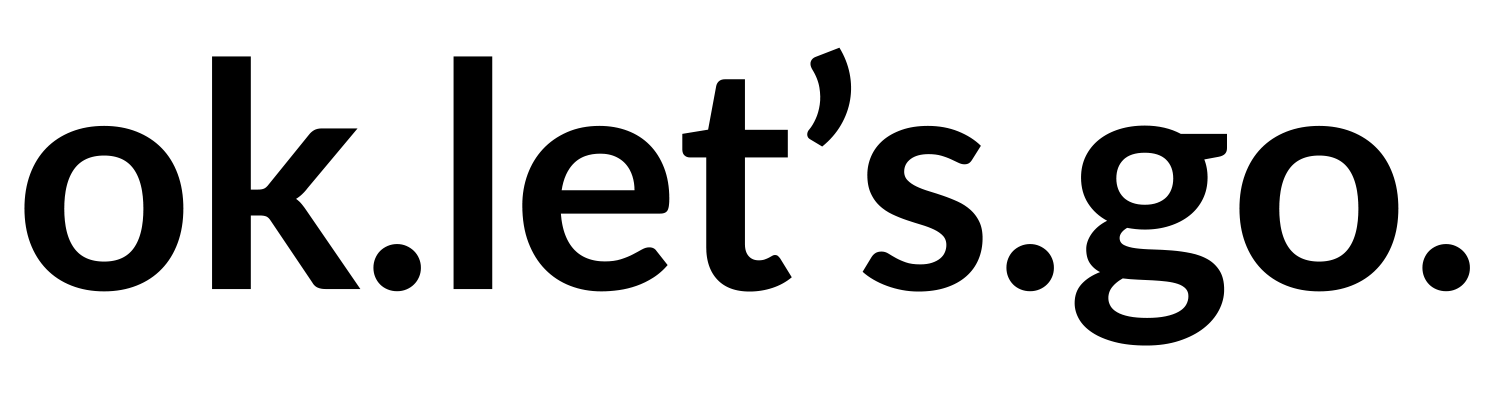
<style>
.page{position:relative;width:1500px;height:400px;background:#ffffff}
.page>*{position:absolute;margin:0}
.t1{font:312.5px "Lato-Bold";color:#000000}
</style>
<div class="page">
<p class="t1" style="left:24px;top:47px;width:1446px;height:299px">ok.let’s.go.</p>
</div>
